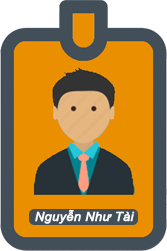
<style>
.page{position:relative;width:167px;height:251px;background:#e98f00}
.page>*{position:absolute;margin:0}
.t1{font:12.4px "Arial-ItalicMT";color:#ffffff;font-weight:bold;scale:1.04 1}
</style>
<div class="page">
<p class="t1" style="left:35px;top:209px;width:100px;height:15px">Nguyễn Như Tài</p>
</div>
